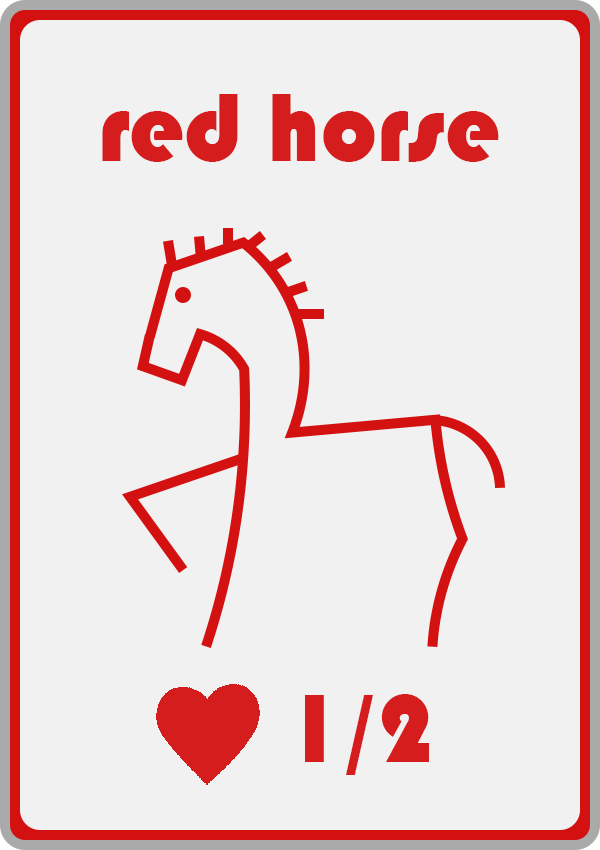
<style>
.page{position:relative;width:600px;height:850px;background:#f1f1f1}
.page>*{position:absolute;margin:0}
.t1{font:100px "Bauhaus93";color:#d51d1d}
</style>
<div class="page">
<p class="t1" style="left:102px;top:94px;width:397px;height:68px">red horse</p>
<p class="t1" style="left:305px;top:694px;width:124px;height:81px">1/2</p>
</div>
